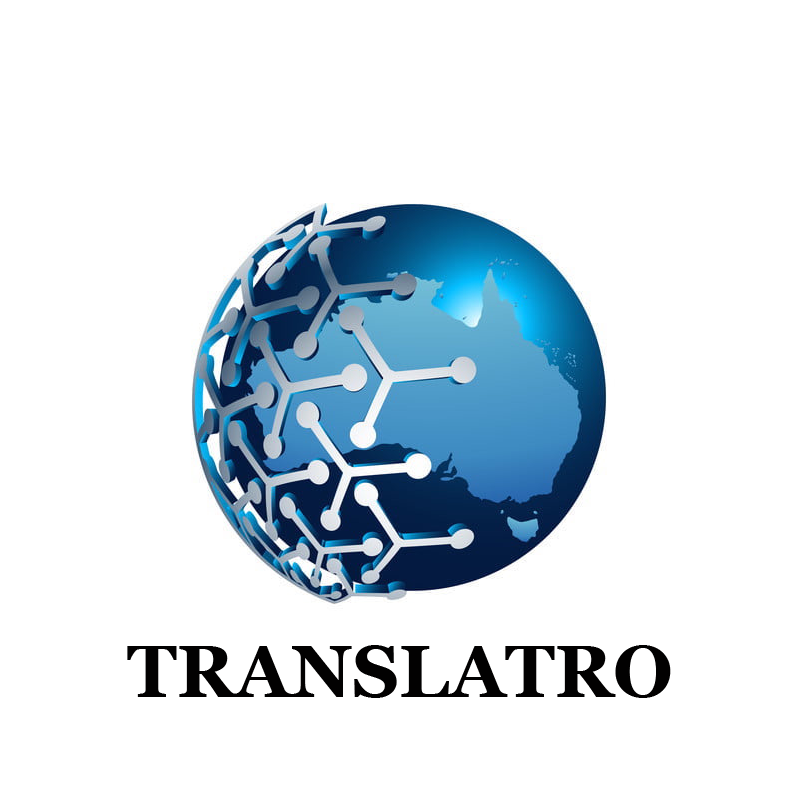
<style>
.page{position:relative;width:800px;height:800px;background:#ffffff}
.page>*{position:absolute;margin:0}
.t1{font:72.6px "Georgia-Bold";letter-spacing:0.005em;color:#020101;text-transform:uppercase}
</style>
<div class="page">
<p class="t1" style="left:127px;top:645px;width:544px;height:53px">Translatro</p>
</div>
